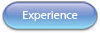
<style>
.page{position:relative;width:100px;height:33px}
.page>*{position:absolute;margin:0}
.t1{font:11.9px "MyriadPro-Regular";color:#ffffff}
</style>
<div class="page">
<p class="t1" style="left:23px;top:11px;width:55px;height:10px">Experience</p>
</div>
